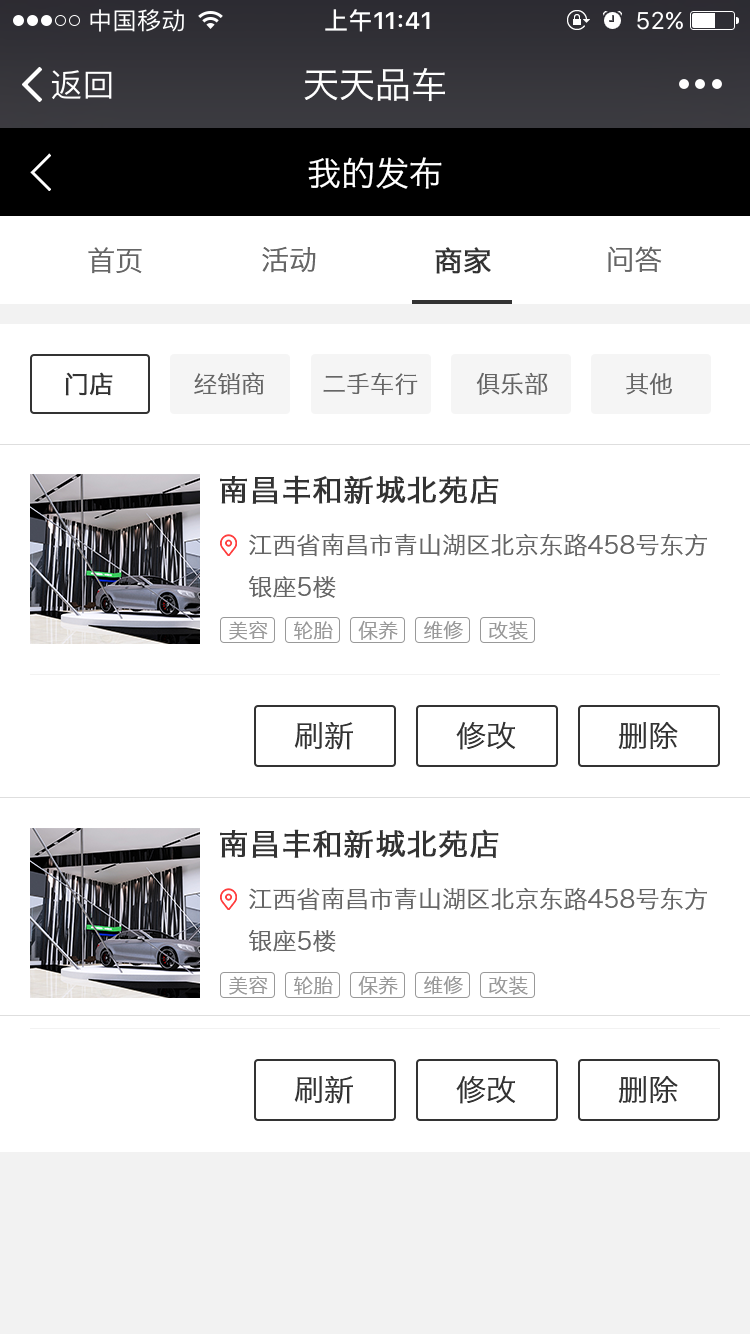
<style>
.page{position:relative;width:750px;height:1334px;background:#ffffff}
.page>*{position:absolute;margin:0}
.t1{font:36px "HiraginoSansGB-W3";color:#ffffff}
.t2{font:34px "HiraginoSansGB-W3";color:#ffffff}
.t3{font:28px "HiraginoSansGB-W3";color:#666666}
.t4{font:28px "HiraginoSansGB-W3";color:#333333;font-weight:bold}
.t5{font:24px "HiraginoSansGB-W3";color:#333333;font-weight:bold}
.t6{font:24px "HiraginoSansGB-W3";color:#666666}
.t7{font:30px "HiraginoSansGB-W3";letter-spacing:0.01em;color:#333333;font-weight:bold}
.t8{font:24px "HiraginoSansGB-W3";letter-spacing:0.01em;color:#666666}
.t9{font:20px "HiraginoSansGB-W3";color:#999999}
.t10{font:30px "HiraginoSansGB-W3";color:#333333}
</style>
<div class="page">
<p class="t1" style="left:304px;top:68px;width:141px;height:34px">天天品车</p>
<p class="t2" style="left:308px;top:157px;width:134px;height:32px">我的发布</p>
<p class="t3" style="left:262px;top:246px;width:54px;height:27px">活动</p>
<p class="t3" style="left:608px;top:246px;width:54px;height:26px">问答</p>
<p class="t3" style="left:88px;top:247px;width:54px;height:27px">首页</p>
<p class="t4" style="left:435px;top:247px;width:56px;height:27px">商家</p>
<p class="t5" style="left:65px;top:372px;width:48px;height:24px">门店</p>
<p class="t6" style="left:194px;top:372px;width:70px;height:23px">经销商</p>
<p class="t6" style="left:323px;top:372px;width:95px;height:23px">二手车行</p>
<p class="t6" style="left:476px;top:372px;width:72px;height:23px">俱乐部</p>
<p class="t6" style="left:626px;top:373px;width:46px;height:22px">其他</p>
<p class="t7" style="left:220px;top:475px;width:279px;height:29px">南昌丰和新城北苑店</p>
<p class="t8" style="left:248px;top:533px;width:459px;height:65px">江西省南昌市青山湖区北京东路458号东方<br>银座5楼</p>
<p class="t9" style="left:229px;top:621px;width:39px;height:19px">美容</p>
<p class="t9" style="left:294px;top:621px;width:39px;height:19px">轮胎</p>
<p class="t9" style="left:358px;top:620px;width:40px;height:20px">保养</p>
<p class="t9" style="left:424px;top:621px;width:39px;height:19px">维修</p>
<p class="t9" style="left:489px;top:621px;width:39px;height:19px">改装</p>
<p class="t10" style="left:294px;top:722px;width:59px;height:28px">刷新</p>
<p class="t10" style="left:456px;top:721px;width:60px;height:29px">修改</p>
<p class="t10" style="left:618px;top:721px;width:60px;height:28px">删除</p>
<p class="t7" style="left:220px;top:829px;width:279px;height:29px">南昌丰和新城北苑店</p>
<p class="t8" style="left:248px;top:887px;width:459px;height:65px">江西省南昌市青山湖区北京东路458号东方<br>银座5楼</p>
<p class="t9" style="left:229px;top:976px;width:39px;height:19px">美容</p>
<p class="t9" style="left:294px;top:976px;width:39px;height:19px">轮胎</p>
<p class="t9" style="left:358px;top:975px;width:40px;height:20px">保养</p>
<p class="t9" style="left:424px;top:976px;width:39px;height:19px">维修</p>
<p class="t9" style="left:489px;top:976px;width:39px;height:19px">改装</p>
<p class="t10" style="left:294px;top:1076px;width:59px;height:28px">刷新</p>
<p class="t10" style="left:456px;top:1075px;width:60px;height:29px">修改</p>
<p class="t10" style="left:618px;top:1075px;width:60px;height:28px">删除</p>
</div>
